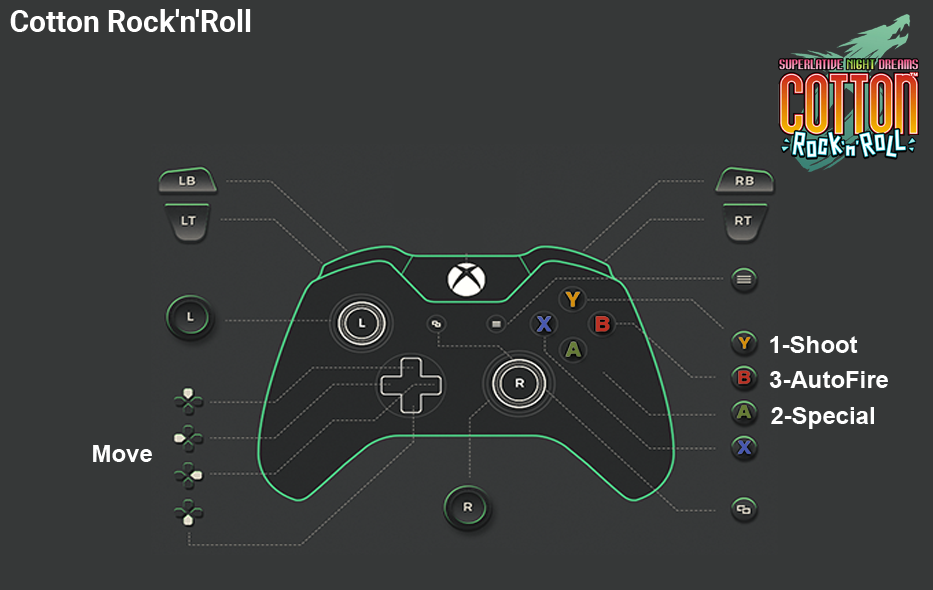
<style>
.page{position:relative;width:933px;height:590px;background:#363838}
.page>*{position:absolute;margin:0}
.t1{font:30px "Roboto-Bold";color:#ffffff}
.t2{font:24px "Arial-BoldMT";color:#fefefe}
</style>
<div class="page">
<p class="t1" style="left:10px;top:9px;width:241px;height:23px">Cotton Rock'n'Roll</p>
<p class="t2" style="left:770px;top:336px;width:88px;height:17px">1-Shoot</p>
<p class="t2" style="left:769px;top:371px;width:119px;height:17px">3-AutoFire</p>
<p class="t2" style="left:771px;top:407px;width:103px;height:22px">2-Special</p>
<p class="t2" style="left:93px;top:445px;width:59px;height:17px">Move</p>
</div>
